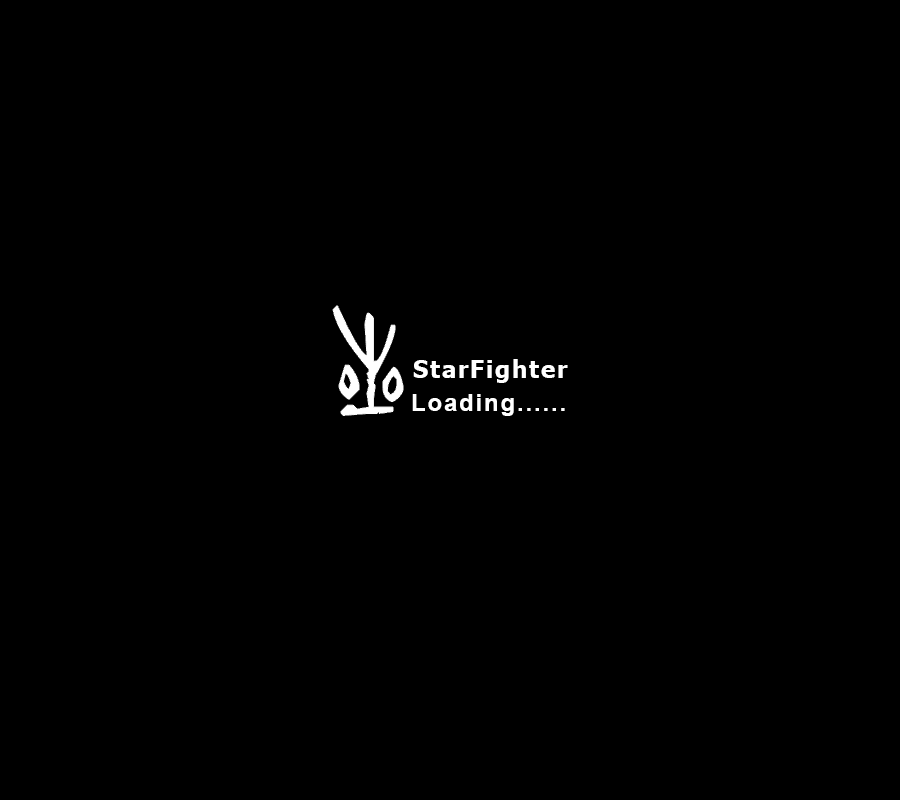
<style>
.page{position:relative;width:900px;height:800px;background:#000000}
.page>*{position:absolute;margin:0}
.t1{font:24px "Tahoma-Bold";letter-spacing:0.075em;color:#ffffff}
.t2{font:24px "Arial-BoldMT";letter-spacing:0.075em;color:#ffffff}
</style>
<div class="page">
<p class="t1" style="left:413px;top:359px;width:155px;height:24px">StarFighter</p>
<p class="t2" style="left:412px;top:394px;width:153px;height:22px">Loading......</p>
</div>
